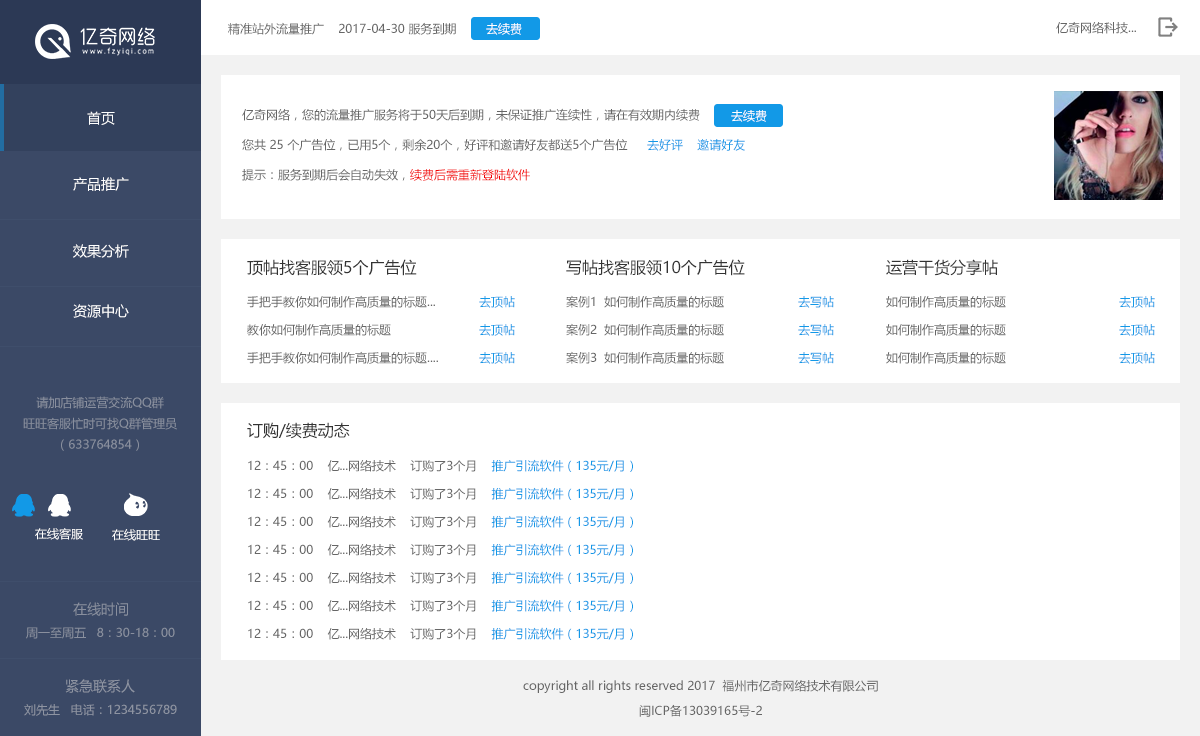
<style>
.page{position:relative;width:1200px;height:736px;background:#ffffff}
.page>*{position:absolute;margin:0}
.t1{font:12px "MicrosoftYaHei";color:#666666}
.t2{font:12px "MicrosoftYaHei";color:#ffffff}
.t3{font:14px "MicrosoftYaHei";color:#ffffff}
.t4{font:12px/30px "MicrosoftYaHei";color:#666666}
.t5{font:12px/30px "MicrosoftYaHei";color:#f30000}
.t6{font:12px "MicrosoftYaHei";color:#1299e7}
.t7{font:16px "MicrosoftYaHei";color:#333333}
.t8{font:12px/28px "MicrosoftYaHei";color:#666666}
.t9{font:12px/28px "MicrosoftYaHei";color:#1299e7}
.t10{font:12px "MicrosoftYaHei";color:#898f9e}
.t11{font:11.7px "MicrosoftYaHei";color:#ffffff}
.t12{font:14px "MicrosoftYaHei";color:#898f9e}
.t13{font:14px "MicrosoftYaHei";color:#8e94a2}
.t14{font:12px "MicrosoftYaHei";color:#8e94a2}
</style>
<div class="page">
<p class="t1" style="left:228px;top:22px;width:228px;height:13px">精准站外流量推广    2017-04-30 服务到期</p>
<p class="t2" style="left:486px;top:23px;width:36px;height:12px">去续费</p>
<p class="t1" style="left:1056px;top:22px;width:80px;height:12px">亿奇网络科技...</p>
<p class="t3" style="left:87px;top:111px;width:28px;height:14px">首页</p>
<p class="t4" style="left:242px;top:108px;width:458px;height:73px;text-align:justify">亿奇网络，您的流量推广服务将于50天后到期，未保证推广连续性，请在有效期内续费<br>您共 25 个广告位，已用5个，剩余20个，好评和邀请好友都送5个广告位<br>提示：服务到期后会自动失效，<span class="t5">续费后需重新登陆软件</span></p>
<p class="t2" style="left:731px;top:110px;width:36px;height:12px">去续费</p>
<p class="t6" style="left:647px;top:139px;width:98px;height:12px">去好评    邀请好友</p>
<p class="t3" style="left:73px;top:177px;width:56px;height:14px">产品推广</p>
<p class="t3" style="left:73px;top:244px;width:56px;height:14px">效果分析</p>
<p class="t7" style="left:247px;top:259px;width:170px;height:17px">顶帖找客服领5个广告位</p>
<p class="t7" style="left:566px;top:259px;width:179px;height:17px">写帖找客服领10个广告位</p>
<p class="t7" style="left:886px;top:259px;width:112px;height:17px">运营干货分享帖</p>
<p class="t3" style="left:73px;top:304px;width:56px;height:14px">资源中心</p>
<p class="t8" style="left:247px;top:295px;width:191px;height:69px;text-align:justify">手把手教你如何制作高质量的标题...<br>教你如何制作高质量的标题<br>手把手教你如何制作高质量的标题....</p>
<p class="t9" style="left:479px;top:296px;width:36px;height:68px;text-align:justify">去顶帖<br>去顶帖<br>去顶帖</p>
<p class="t8" style="left:566px;top:295px;width:158px;height:69px;text-align:justify">案例1  如何制作高质量的标题<br>案例2  如何制作高质量的标题<br>案例3  如何制作高质量的标题</p>
<p class="t9" style="left:798px;top:296px;width:36px;height:68px;text-align:justify">去写帖<br>去写帖<br>去写帖</p>
<p class="t8" style="left:886px;top:295px;width:120px;height:69px;text-align:justify">如何制作高质量的标题<br>如何制作高质量的标题<br>如何制作高质量的标题</p>
<p class="t9" style="left:1119px;top:296px;width:36px;height:68px;text-align:justify">去顶帖<br>去顶帖<br>去顶帖</p>
<p class="t10" style="left:23px;top:396px;width:154px;height:55px;text-align:center">请加店铺运营交流QQ群<br>旺旺客服忙时可找Q群管理员<br>（633764854）</p>
<p class="t7" style="left:247px;top:422px;width:103px;height:17px">订购/续费动态</p>
<p class="t8" style="left:248px;top:459px;width:385px;height:181px;text-align:justify">12：45：00    亿...网络技术    订购了3个月    <span class="t9">推广引流软件（135元/月）<br></span>12：45：00    亿...网络技术    订购了3个月    <span class="t9">推广引流软件（135元/月）<br></span>12：45：00    亿...网络技术    订购了3个月    <span class="t9">推广引流软件（135元/月）<br></span>12：45：00    亿...网络技术    订购了3个月    <span class="t9">推广引流软件（135元/月）<br></span>12：45：00    亿...网络技术    订购了3个月    <span class="t9">推广引流软件（135元/月）<br></span>12：45：00    亿...网络技术    订购了3个月    <span class="t9">推广引流软件（135元/月）<br></span>12：45：00    亿...网络技术    订购了3个月    <span class="t9">推广引流软件（135元/月）</span></p>
<p class="t11" style="left:35px;top:528px;width:48px;height:12px">在线客服</p>
<p class="t11" style="left:112px;top:529px;width:48px;height:12px">在线旺旺</p>
<p class="t12" style="left:73px;top:602px;width:55px;height:14px">在线时间</p>
<p class="t10" style="left:26px;top:627px;width:149px;height:12px">周一至周五   8：30-18：00</p>
<p class="t13" style="left:65px;top:679px;width:70px;height:14px">紧急联系人</p>
<p class="t1" style="left:523px;top:679px;width:355px;height:14px">copyright all rights reserved 2017  福州市亿奇网络技术有限公司</p>
<p class="t14" style="left:24px;top:704px;width:153px;height:12px">刘先生   电话：1234556789</p>
<p class="t1" style="left:639px;top:704px;width:123px;height:13px">闽ICP备13039165号-2</p>
</div>
